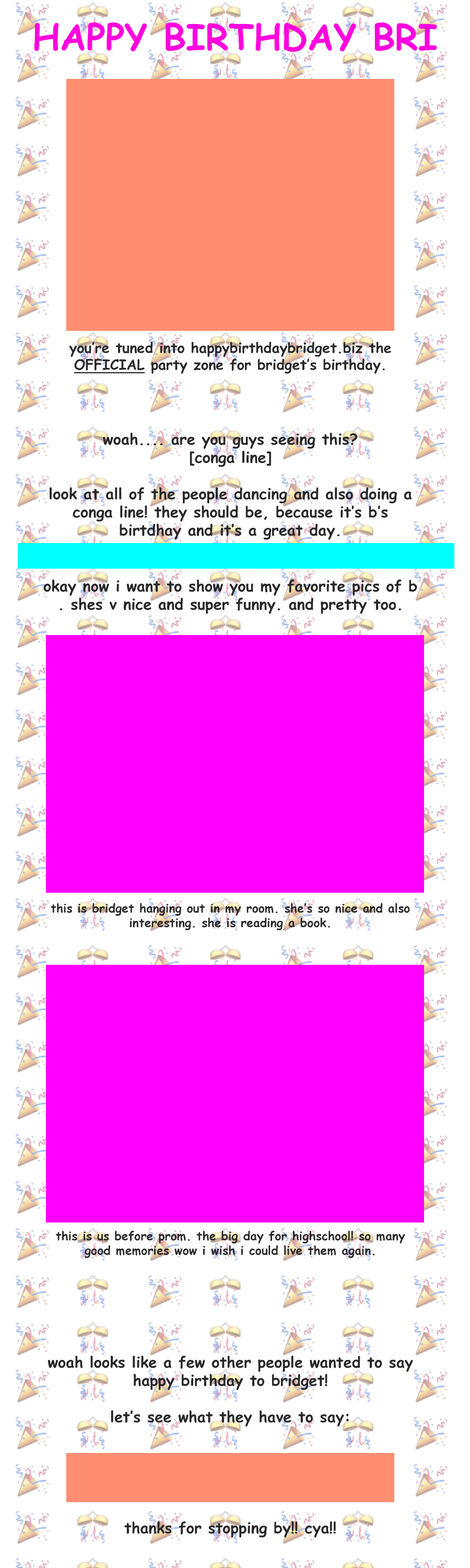
<style>
.page{position:relative;width:470px;height:1568px;background:#ffffff}
.page>*{position:absolute;margin:0}
.t1{font:36.1px "ComicSansMS-Bold";color:#ff00de}
.t2{font:14.1px "ComicSansMS-Bold";color:#272727}
.t3{font:14.1px "ComicSansMS-Bold";color:#272727;text-decoration:underline}
.t4{font:15.2px "ComicSansMS-Bold";color:#272727}
.t5{font:12px "ComicSansMS-Bold";color:#272727}
</style>
<div class="page">
<p class="t1" style="left:34px;top:22px;width:403px;height:30px">HAPPY BIRTHDAY BRI</p>
<p class="t2" style="left:69px;top:342px;width:322px;height:32px;text-align:center">you’re tuned into happybirthdaybridget.biz the <span class="t3">OFFICIAL </span>party zone for bridget’s birthday.</p>
<p class="t4" style="left:50px;top:432px;width:362px;height:108px;text-align:center">woah.... are you guys seeing this?<br>[conga line]<br><br>look at all of the people dancing and also doing a conga line! they should be, because it’s b’s birtdhay and it’s a great day.</p>
<p class="t4" style="left:43px;top:579px;width:375px;height:35px;text-align:center">okay now i want to show you my favorite pics of b<br>. shes v nice and super funny. and pretty too.</p>
<p class="t5" style="left:51px;top:903px;width:359px;height:27px;text-align:center">this is bridget hanging out in my room. she’s so nice and also interesting. she is reading a book.</p>
<p class="t5" style="left:56px;top:1230px;width:350px;height:28px;text-align:center">this is us before prom. the big day for highschool! so many good memories wow i wish i could live them again.</p>
<p class="t4" style="left:48px;top:1355px;width:365px;height:72px;text-align:center">woah looks like a few other people wanted to say happy birthday to bridget!<br><br>let’s see what they have to say:</p>
<p class="t4" style="left:124px;top:1521px;width:212px;height:17px">thanks for stopping by!! cya!!</p>
</div>
